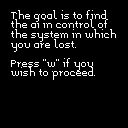
<style>
.page{position:relative;width:128px;height:128px;background:#000000}
.page>*{position:absolute;margin:0}
.t1{font:8px "Memoria";color:#fefefe}
</style>
<div class="page">
<p class="t1" style="left:11px;top:10px;width:105px;height:70px">The goal is to find the ai in control of the system in which you are lost.<br><br>Press "w" if you wish to proceed.</p>
</div>
